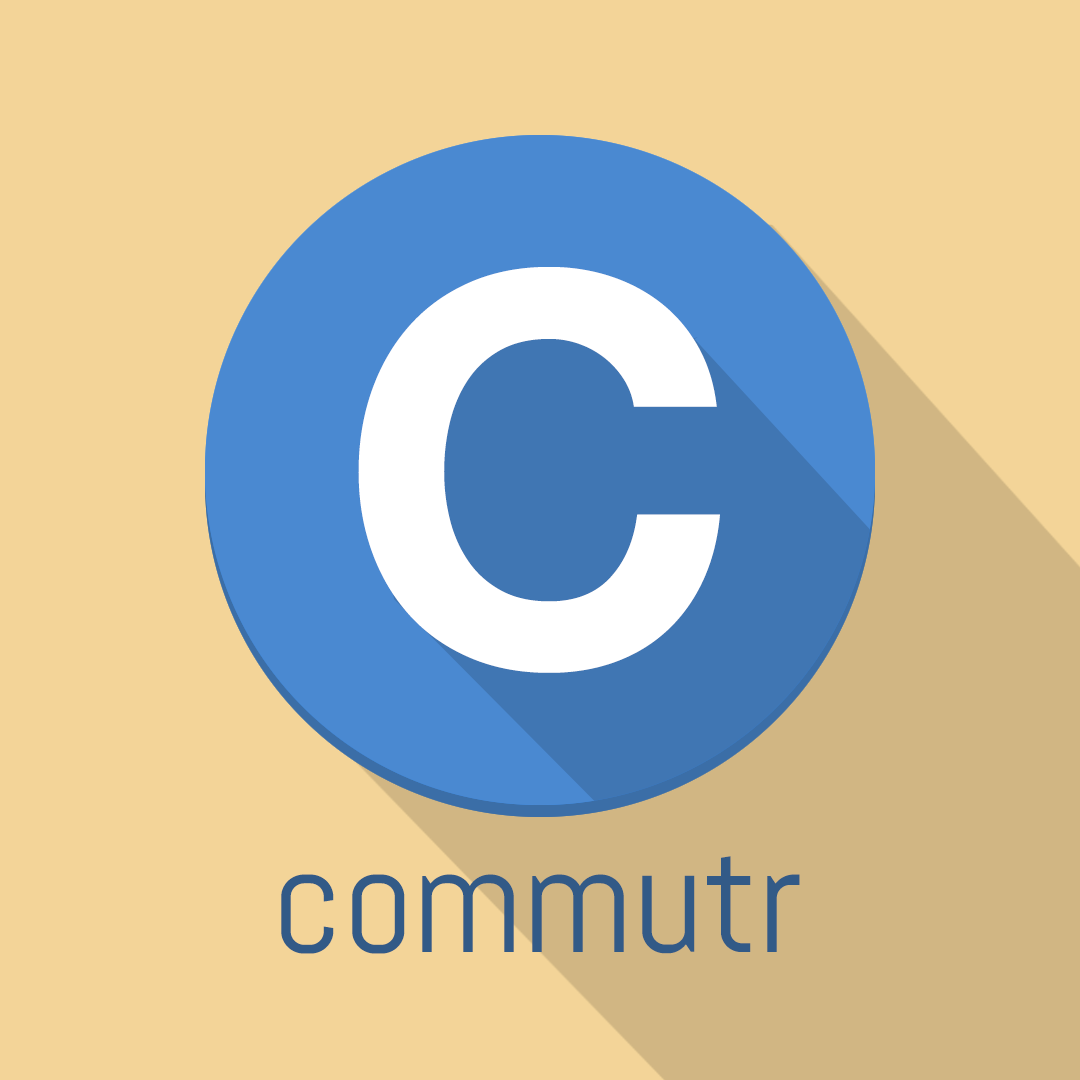
<style>
.page{position:relative;width:1080px;height:1080px;background:#f3d498}
.page>*{position:absolute;margin:0}
.t1{font:543.1px "HelveticaNeue-Bold";color:#ffffff}
.t2{font:151.6px "Abel-Regular";color:#325a87}
.t3{font:151.6px "5thGradeCursive";color:#ffffff}
</style>
<div class="page">
<p class="t1" style="left:358px;top:267px;width:362px;height:406px">C</p>
<p class="t2" style="left:281px;top:856px;width:519px;height:98px"><span class="t3"><br></span>commutr</p>
</div>
